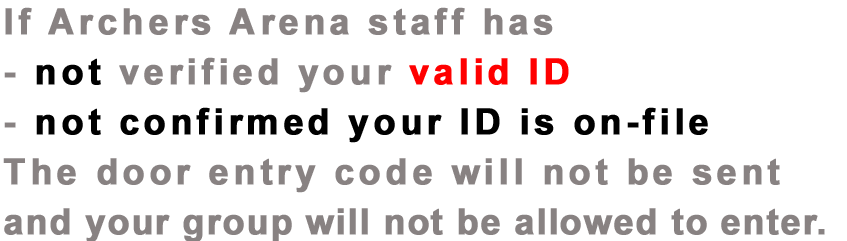
<style>
.page{position:relative;width:847px;height:241px;background:#ffffff}
.page>*{position:absolute;margin:0}
.t1{font:36px/50px "Arial-BoldMT";letter-spacing:0.025em;color:#888282;font-weight:bold}
.t2{font:36px/50px "Arial-BoldMT";letter-spacing:0.1em;color:#888282;font-weight:bold}
.t3{font:36px/50px "Arial-BoldMT";letter-spacing:0.1em;color:#000000;font-weight:bold}
.t4{font:36px/50px "Arial-BoldMT";letter-spacing:0.1em;color:#ff0000;font-weight:bold}
</style>
<div class="page">
<p class="t1" style="left:3px;top:7px;width:822px;height:236px"><span class="t2">If Archers Arena staff has<br>- </span><span class="t3">not</span><span class="t2"> verified your </span><span class="t4">valid ID<br></span><span class="t2">- </span><span class="t3">not confirmed your ID is on-file<br></span><span class="t2">The door entry code will not be sent<br></span>and your group will not be allowed to enter.</p>
</div>
